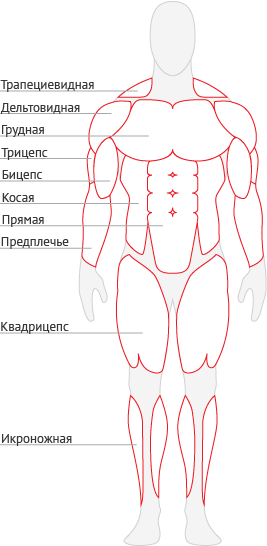
<style>
.page{position:relative;width:267px;height:546px;background:#ffffff}
.page>*{position:absolute;margin:0}
.t1{font:13px "PTSans-Regular";color:#373737}
</style>
<div class="page">
<p class="t1" style="left:0px;top:80px;width:94px;height:12px">Трапециевидная</p>
<p class="t1" style="left:1px;top:103px;width:79px;height:11px">Дельтовидная</p>
<p class="t1" style="left:2px;top:125px;width:42px;height:12px">Грудная</p>
<p class="t1" style="left:1px;top:148px;width:47px;height:12px">Трицепс</p>
<p class="t1" style="left:2px;top:170px;width:41px;height:11px">Бицепс</p>
<p class="t1" style="left:2px;top:193px;width:32px;height:9px">Косая</p>
<p class="t1" style="left:2px;top:215px;width:42px;height:12px">Прямая</p>
<p class="t1" style="left:1px;top:237px;width:68px;height:12px">Предплечье</p>
<p class="t1" style="left:1px;top:322px;width:68px;height:12px">Квадрицепс</p>
<p class="t1" style="left:2px;top:434px;width:70px;height:12px">Икроножная</p>
</div>
